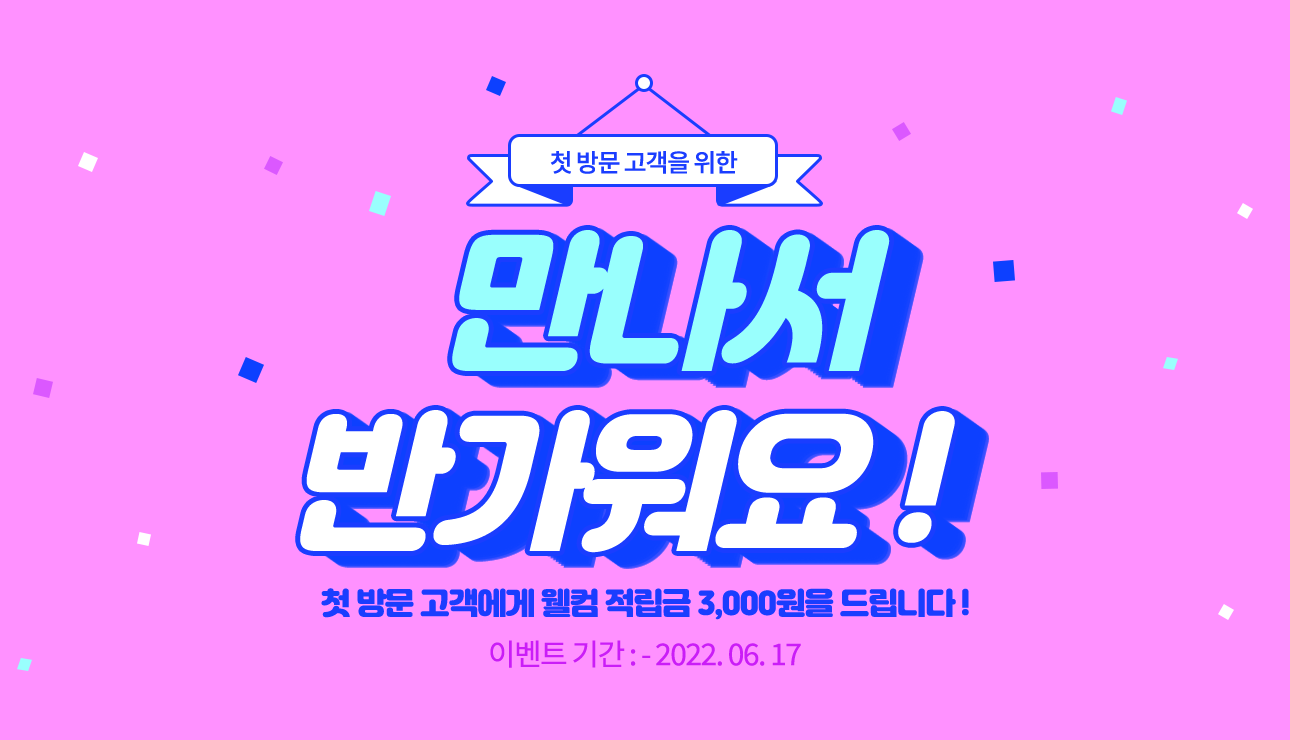
<style>
.page{position:relative;width:1290px;height:740px;background:#ff91ff}
.page>*{position:absolute;margin:0}
.t1{font:25px "NotoSansKR-Medium";letter-spacing:-0.05em;color:#1a3dff}
.t2{font:154.1px "JalnanOTF";letter-spacing:-0.05em;color:#ffffff}
.t3{font:154.1px "JalnanOTF";letter-spacing:-0.05em;color:#99fffd}
.t4{font:30px "JalnanOTF";letter-spacing:-0.05em;color:#1a3dff}
.t5{font:30px "NotoSansKR-Regular";letter-spacing:-0.05em;color:#ca1df7}
</style>
<div class="page">
<p class="t1" style="left:550px;top:151px;width:188px;height:23px">첫 방문 고객을 위한</p>
<p class="t2" style="left:300px;top:230px;width:655px;height:323px;text-align:center"><span class="t3">만나서<br></span>반가워요 !</p>
<p class="t4" style="left:321px;top:588px;width:648px;height:32px">첫 방문 고객에게 웰컴 적립금 3,000원을 드립니다 !</p>
<p class="t5" style="left:490px;top:640px;width:311px;height:28px">이벤트 기간 : - 2022. 06. 17</p>
</div>
